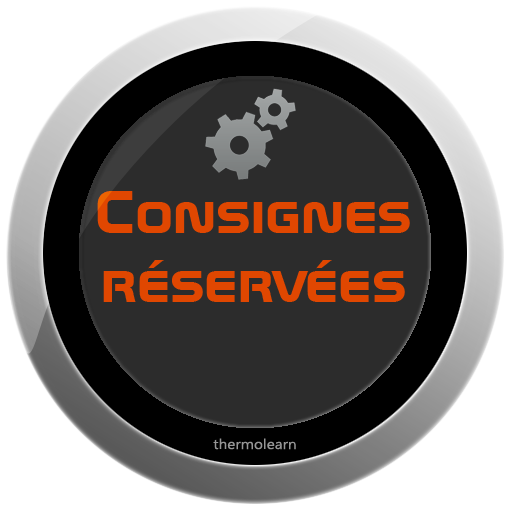
<style>
.page{position:relative;width:512px;height:512px;background:#2c2c2c}
.page>*{position:absolute;margin:0}
.t1{font:60px/9.9px "SpaceBT-Bold";color:#e04701;scale:1.1 1}
.t2{font:14px "KhmerUI";color:#969696;scale:1.1 1}
</style>
<div class="page">
<p class="t1" style="left:97px;top:191px;width:313px;height:111px;text-align:center">Consignes<br><br><br><br><br><br><br>réservées</p>
<p class="t2" style="left:213px;top:438px;width:83px;height:12px">thermolearn</p>
</div>
